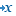
<style>
.page{position:relative;width:16px;height:16px;background:#ffffff}
.page>*{position:absolute;margin:0}
.t1{font:14px "Georgia-Italic";color:#005999}
</style>
<div class="page">
<p class="t1" style="left:4px;top:5px;width:9px;height:7px">x</p>
</div>
